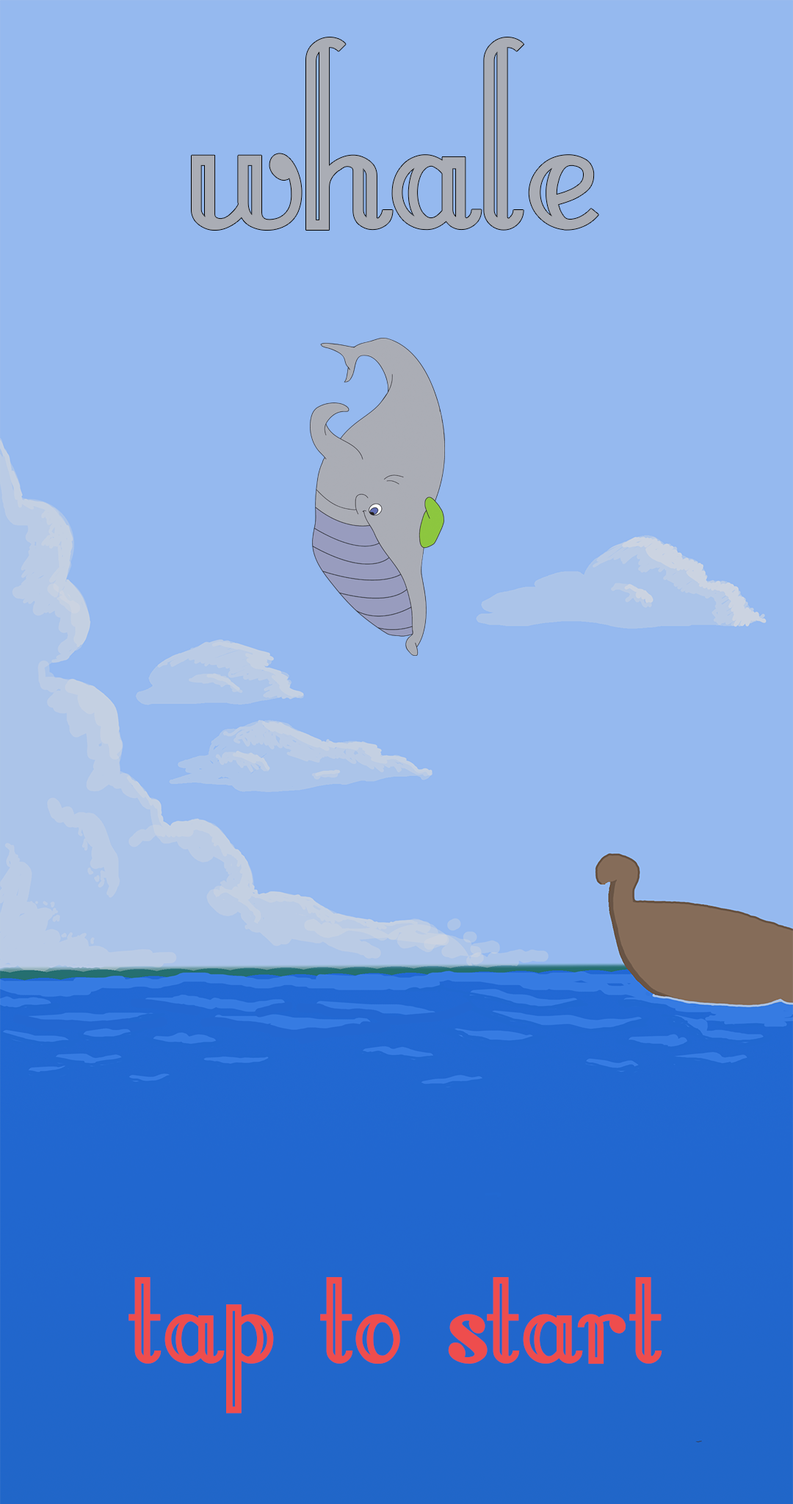
<style>
.page{position:relative;width:793px;height:1504px;background:#95b9ef}
.page>*{position:absolute;margin:0}
.t1{font:330.4px "LittleLordFontleroy";color:#aaadb5}
.t2{font:220.3px "LittleLordFontleroy";color:#ee4d4d}
</style>
<div class="page">
<p class="t1" style="left:192px;top:37px;width:406px;height:193px">whale</p>
<p class="t2" style="left:128px;top:1277px;width:534px;height:136px">tap to start</p>
</div>
